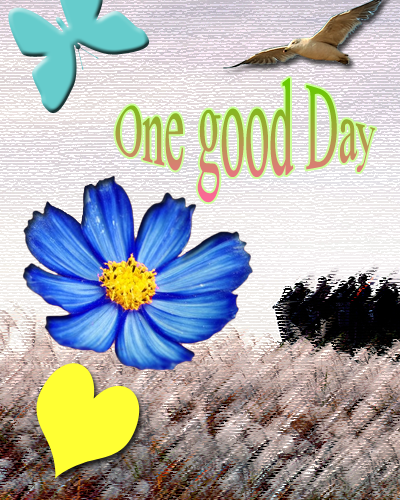
<style>
.page{position:relative;width:400px;height:500px}
.page>*{position:absolute;margin:0}
.t1{font:45px "TimesNewRomanPSMT"}
</style>
<div class="page">
<p class="t1" style="left:115px;top:78px;width:261px;height:125px">One good Day</p>
</div>
